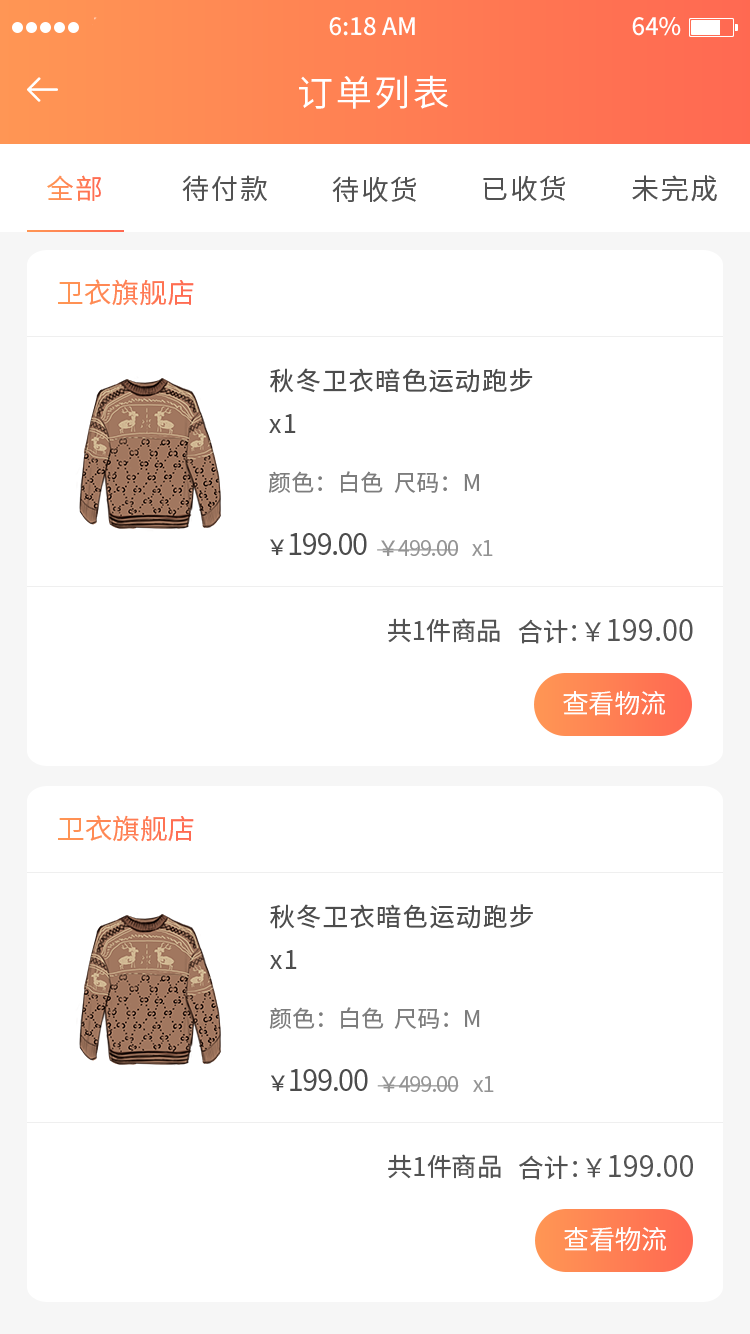
<style>
.page{position:relative;width:750px;height:1334px;background:#ffffff}
.page>*{position:absolute;margin:0}
.t1{font:36.2px "NotoSansHans-Regular";letter-spacing:0.075em;color:#ffffff;text-transform:uppercase}
.t2{font:27.8px "NotoSansHans-Regular";letter-spacing:0.05em;color:#ff7c53;text-transform:uppercase}
.t3{font:27.8px "NotoSansHans-Regular";letter-spacing:0.05em;color:#515151;text-transform:uppercase}
.t4{font:27.8px "NotoSansHans-Regular";color:#ff7f53;text-transform:uppercase}
.t5{font:25.4px/43.5px "NotoSansHans-Regular";letter-spacing:0.05em;color:#4d4d4d}
.t6{font:23px "NotoSansHans-Regular";color:#7d7d7d;text-transform:uppercase}
.t7{font:29px "NotoSansHans-Regular";letter-spacing:-0.05em;color:#4c4c4c;text-transform:uppercase}
.t8{font:21.7px "NotoSansHans-Regular";letter-spacing:-0.05em;color:#4c4c4c;text-transform:uppercase}
.t9{font:21.7px "NotoSansHans-Regular";letter-spacing:-0.05em;color:#949494;text-transform:uppercase}
.t10{font:21.7px "NotoSansHans-Regular";letter-spacing:-0.05em;color:#949494}
.t11{font:25.4px "NotoSansHans-Regular";color:#535353;text-transform:uppercase}
.t12{font:29px "NotoSansHans-Regular";color:#535353;text-transform:uppercase}
.t13{font:26px "NotoSansHans-Regular";color:#ffffff;text-transform:uppercase}
.t14{font:21.8px "NotoSansHans-Regular";letter-spacing:-0.05em;color:#4c4c4c;text-transform:uppercase}
.t15{font:21.8px "NotoSansHans-Regular";letter-spacing:-0.05em;color:#949494;text-transform:uppercase}
.t16{font:21.8px "NotoSansHans-Regular";letter-spacing:-0.05em;color:#949494}
</style>
<div class="page">
<p class="t1" style="left:299px;top:75px;width:150px;height:34px">订单列表</p>
<p class="t2" style="left:47px;top:175px;width:54px;height:26px">全部</p>
<p class="t3" style="left:182px;top:175px;width:85px;height:26px">待付款</p>
<p class="t3" style="left:332px;top:176px;width:84px;height:26px">待收货</p>
<p class="t3" style="left:483px;top:175px;width:82px;height:26px">已收货</p>
<p class="t3" style="left:632px;top:175px;width:85px;height:27px">未完成</p>
<p class="t4" style="left:58px;top:279px;width:136px;height:27px">卫衣旗舰店</p>
<p class="t5" style="left:269px;top:368px;width:264px;height:65px">秋冬卫衣暗色运动跑步<br>x1</p>
<p class="t6" style="left:268px;top:471px;width:211px;height:22px">颜色：白色  尺码：M</p>
<p class="t7" style="left:270px;top:533px;width:97px;height:22px"><span class="t8">￥</span>199.00</p>
<p class="t9" style="left:377px;top:540px;width:81px;height:16px">￥499.00</p>
<p class="t10" style="left:472px;top:540px;width:21px;height:16px">x<span class="t9">1</span></p>
<p class="t11" style="left:388px;top:618px;width:112px;height:25px">共1件商品</p>
<p class="t11" style="left:518px;top:619px;width:58px;height:25px">合计：</p>
<p class="t12" style="left:585px;top:619px;width:108px;height:23px"><span class="t11">￥</span>199.00</p>
<p class="t13" style="left:563px;top:691px;width:102px;height:25px">查看物流</p>
<p class="t4" style="left:58px;top:815px;width:136px;height:27px">卫衣旗舰店</p>
<p class="t5" style="left:270px;top:904px;width:263px;height:65px">秋冬卫衣暗色运动跑步<br>x1</p>
<p class="t6" style="left:269px;top:1007px;width:211px;height:22px">颜色：白色  尺码：M</p>
<p class="t7" style="left:271px;top:1069px;width:97px;height:22px"><span class="t14">￥</span>199.00</p>
<p class="t15" style="left:377px;top:1076px;width:82px;height:16px">￥499.00</p>
<p class="t16" style="left:473px;top:1076px;width:21px;height:16px">x<span class="t15">1</span></p>
<p class="t11" style="left:388px;top:1154px;width:113px;height:25px">共1件商品</p>
<p class="t11" style="left:519px;top:1155px;width:58px;height:25px">合计：</p>
<p class="t12" style="left:586px;top:1155px;width:107px;height:23px"><span class="t11">￥</span>199.00</p>
<p class="t13" style="left:564px;top:1227px;width:102px;height:25px">查看物流</p>
</div>
